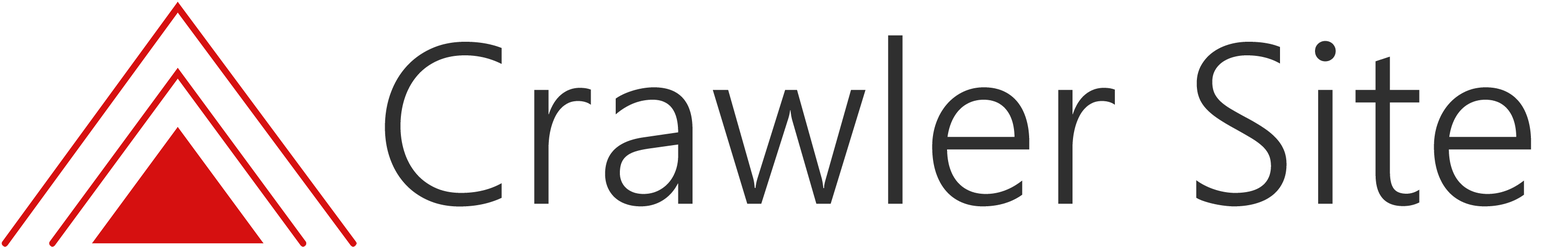
<style>
.page{position:relative;width:1568px;height:248px;background:#ffffff}
.page>*{position:absolute;margin:0}
.t1{font:227.6px "SegoeUI-Semilight";letter-spacing:0.005em;color:#2f2f2f}
</style>
<div class="page">
<p class="t1" style="left:385px;top:35px;width:1146px;height:172px">Crawler Site</p>
</div>
